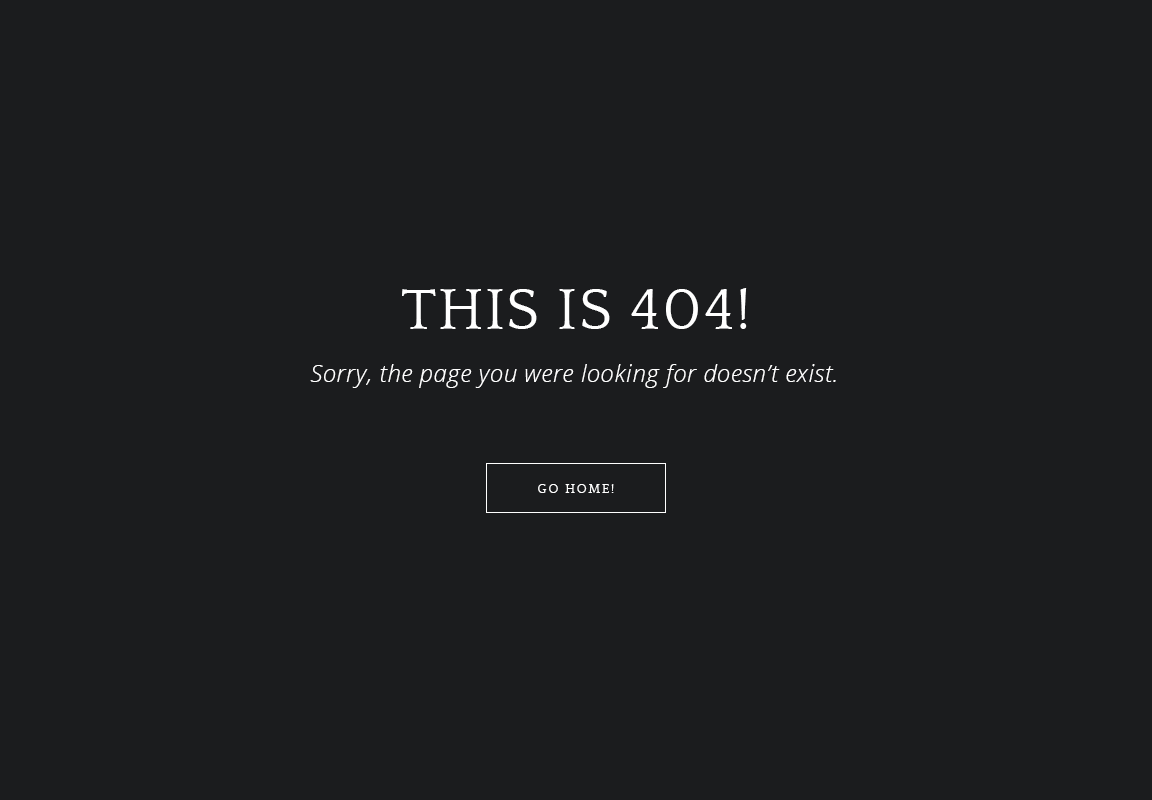
<style>
.page{position:relative;width:1152px;height:800px;background:#1b1c1e}
.page>*{position:absolute;margin:0}
.t1{font:60px "Quattrocento";letter-spacing:0.025em;color:#ffffff}
.t2{font:24px "OpenSansLight-Italic";letter-spacing:0.025em;color:#ffffff}
.t3{font:13px "Quattrocento";letter-spacing:0.14em;color:#ffffff;text-transform:uppercase}
</style>
<div class="page">
<p class="t1" style="left:402px;top:288px;width:345px;height:41px">THIS IS 404!</p>
<p class="t2" style="left:310px;top:364px;width:526px;height:24px">Sorry, the page you were looking for doesn’t exist.</p>
<p class="t3" style="left:538px;top:484px;width:76px;height:9px">GO HOME!</p>
</div>
